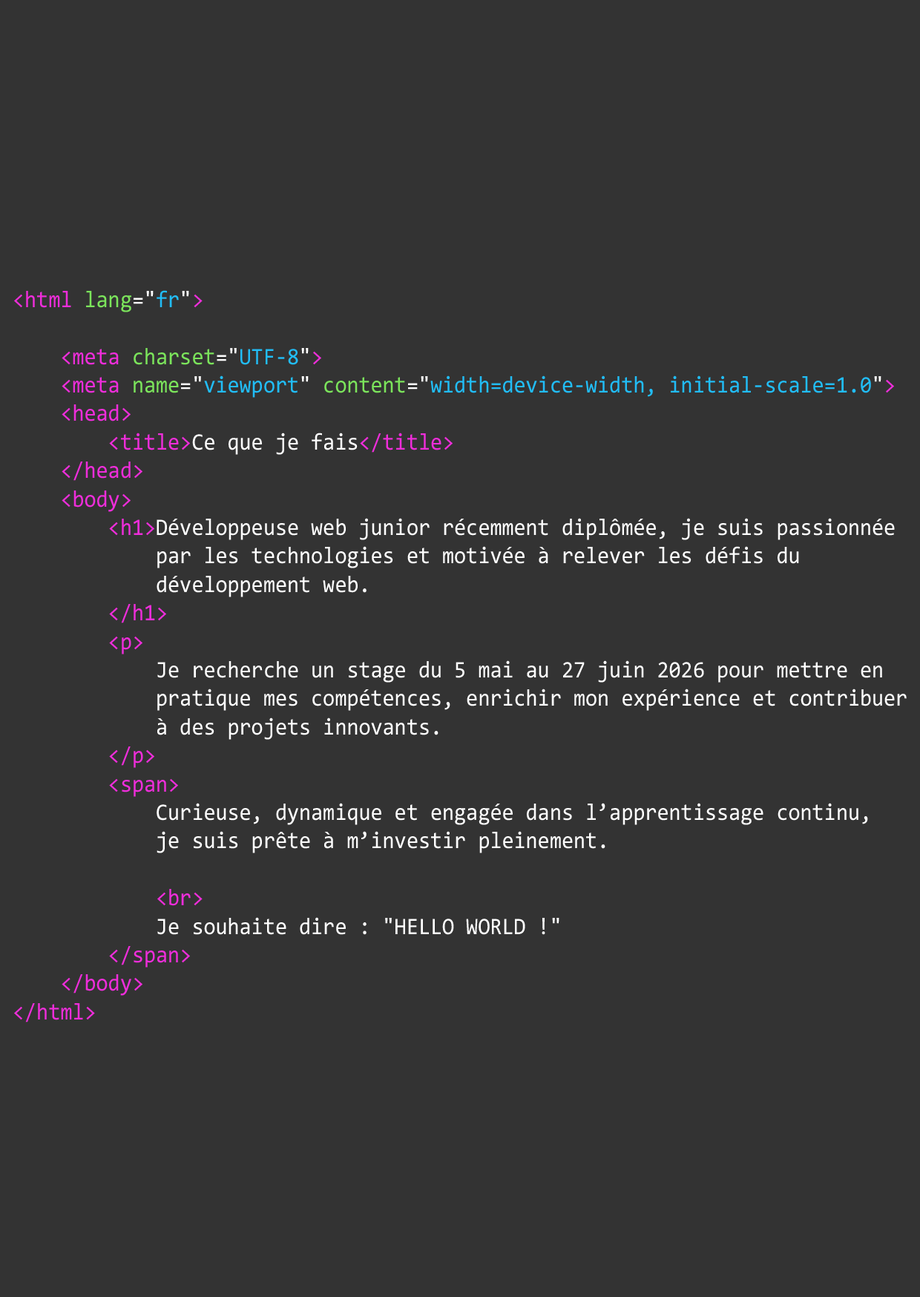
<style>
.page{position:relative;width:920px;height:1297px;background:#333333}
.page>*{position:absolute;margin:0}
.t1{font:23.7px "Consolas";color:#ffffff;scale:0.91 1}
.t2{font:23.7px "Consolas";color:#ee2dda;scale:0.91 1}
.t3{font:23.7px "Consolas";color:#7be45b;scale:0.91 1}
.t4{font:23.7px "Consolas";color:#21bdf7;scale:0.91 1}
</style>
<div class="page">
<p class="t1" style="left:14px;top:290px;width:892px;height:732px"><span class="t2">&lt;html </span><span class="t3">lang</span>="<span class="t4">fr</span>"<span class="t2">&gt;<br><br>    &lt;meta </span><span class="t3">charset</span>="<span class="t4">UTF-8</span>"<span class="t2">&gt;<br>    &lt;meta </span><span class="t3">name</span>="<span class="t4">viewport</span>" <span class="t3">content</span>="<span class="t4">width=device-width, initial-scale=1.0</span>"<span class="t2">&gt;<br>    &lt;head&gt;<br>        &lt;title&gt;</span>Ce que je fais<span class="t2">&lt;/title&gt;<br>    &lt;/head&gt;<br>    &lt;body&gt;<br>        &lt;h1&gt;</span>Développeuse web junior récemment diplômée, je suis passionnée<br>            par les technologies et motivée à relever les défis du <br>            développement web.<br>        <span class="t2">&lt;/h1&gt;<br>        &lt;p&gt;<br>            </span>Je recherche un stage du 5 mai au 27 juin 2026 pour mettre en <br>            pratique mes compétences, enrichir mon expérience et contribuer <br>            à des projets innovants.<br>        <span class="t2">&lt;/p&gt;<br>        &lt;span&gt;<br>            </span>Curieuse, dynamique et engagée dans l’apprentissage continu,<br>            je suis prête à m’investir pleinement.<br><br>            <span class="t2">&lt;br&gt;<br>            </span>Je souhaite dire : "HELLO WORLD !"<br>        <span class="t2">&lt;/span&gt;<br>    &lt;/body&gt;<br>&lt;/html&gt;</span></p>
</div>
